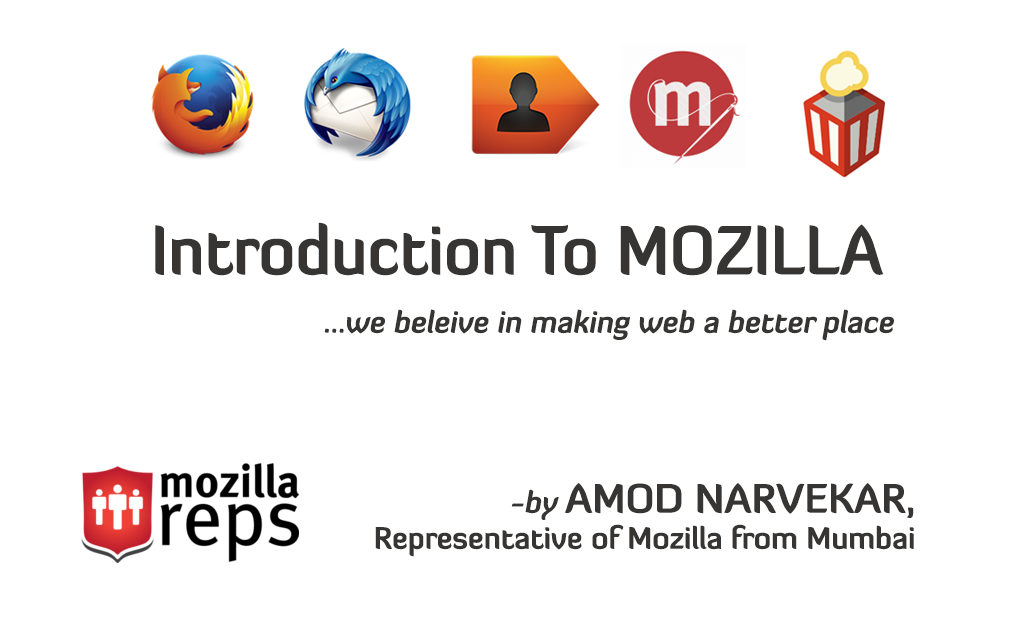
<style>
.page{position:relative;width:1024px;height:640px;background:#ffffff}
.page>*{position:absolute;margin:0}
.t1{font:67.4px "DiavloBold-Regular";color:#363533;scale:0.94 1}
.t2{font:30px "DiavloBold-Regular";color:#363533;font-style:italic}
.t3{font:30px "DiavloBold-Regular";color:#363533}
.t4{font:40px "DiavloBold-Regular";color:#363533}
</style>
<div class="page">
<p class="t1" style="left:155px;top:222px;width:729px;height:54px">Introduction To MOZILLA</p>
<p class="t2" style="left:324px;top:309px;width:570px;height:32px">...we beleive in making web a better place</p>
<p class="t3" style="left:375px;top:483px;width:539px;height:74px;text-align:right"><span class="t2">-by </span><span class="t4">AMOD NARVEKAR,<br></span>Representative of Mozilla from Mumbai</p>
</div>
